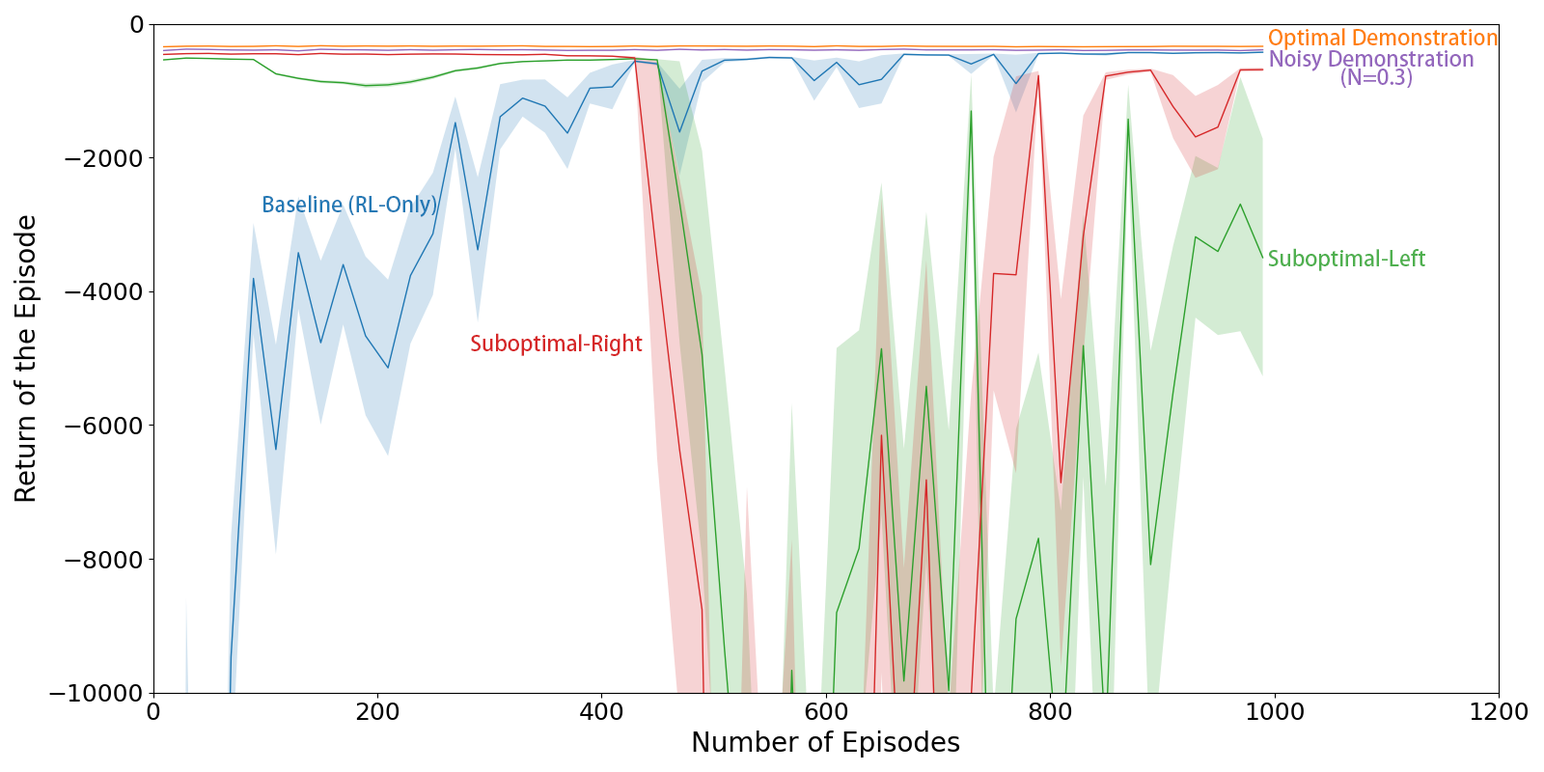
<style>
.page{position:relative;width:1544px;height:772px;background:#ffffff}
.page>*{position:absolute;margin:0}
.t1{font:21.4px "AdobeHeitiStd-Regular";color:#ff7f0e}
.t2{font:21.4px/18.8px "AdobeHeitiStd-Regular";color:#9467bd}
.t3{font:21.4px "AdobeHeitiStd-Regular";color:#2379b5}
.t4{font:21.4px "AdobeHeitiStd-Regular";color:#4fb04f}
.t5{font:21.4px "AdobeHeitiStd-Regular";color:#d62728}
</style>
<div class="page">
<p class="t1" style="left:1269px;top:28px;width:229px;height:22px">Optimal Demonstration</p>
<p class="t2" style="left:1270px;top:50px;width:204px;height:38px;text-align:center">Noisy Demonstration <br> (N=0.3)</p>
<p class="t3" style="left:263px;top:195px;width:173px;height:22px">Baseline (RL-Only)</p>
<p class="t4" style="left:1268px;top:248px;width:158px;height:23px">Suboptimal-Left</p>
<p class="t5" style="left:471px;top:333px;width:172px;height:23px">Suboptimal-Right</p>
</div>
